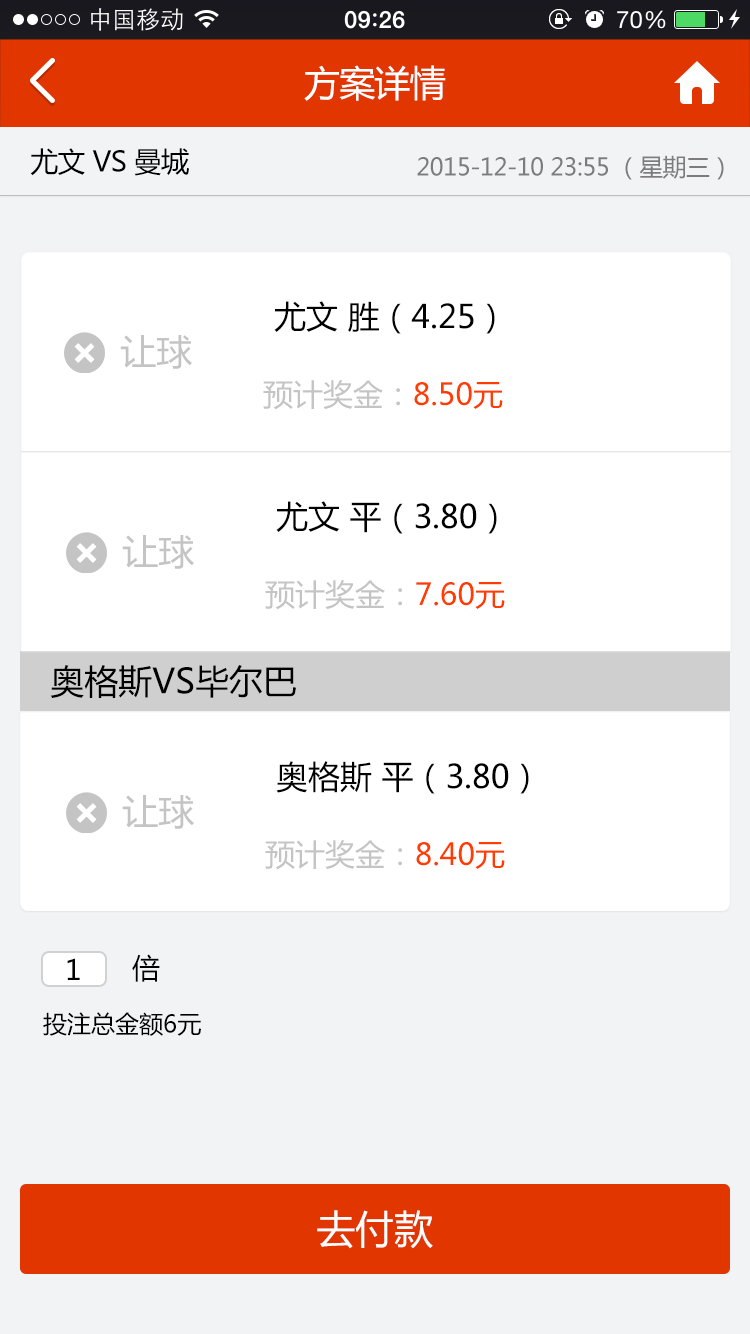
<style>
.page{position:relative;width:750px;height:1334px;background:#ffffff}
.page>*{position:absolute;margin:0}
.t1{font:36px "MicrosoftYaHei";letter-spacing:-0.025em;color:#ffffff}
.t2{font:28px "MicrosoftYaHei";letter-spacing:-0.025em;color:#000000}
.t3{font:24px "MicrosoftYaHei";letter-spacing:-0.025em;color:#7c7c7c}
.t4{font:32px "MicrosoftYaHei";color:#000000}
.t5{font:36px "MicrosoftYaHei";color:#c4c4c4}
.t6{font:30px "MicrosoftYaHei";color:#c4c4c4}
.t7{font:30px "MicrosoftYaHei";color:#ff3d00}
.t8{font:34px "MicrosoftYaHei";color:#000000}
.t9{font:28px "MicrosoftYaHei";color:#000000}
.t10{font:24px "MicrosoftYaHei";color:#000000}
.t11{font:39px "MicrosoftYaHei";color:#ffffff}
</style>
<div class="page">
<p class="t1" style="left:304px;top:65px;width:142px;height:36px">方案详情</p>
<p class="t2" style="left:30px;top:148px;width:159px;height:28px">尤文 VS 曼城</p>
<p class="t3" style="left:417px;top:155px;width:307px;height:25px">2015-12-10 23:55 （星期三）</p>
<p class="t4" style="left:274px;top:301px;width:221px;height:33px">尤文 胜（4.25）</p>
<p class="t5" style="left:120px;top:335px;width:72px;height:34px">让球</p>
<p class="t6" style="left:263px;top:380px;width:240px;height:30px">预计奖金：<span class="t7">8.50元</span></p>
<p class="t4" style="left:276px;top:501px;width:221px;height:33px">尤文 平（3.80）</p>
<p class="t5" style="left:122px;top:535px;width:72px;height:34px">让球</p>
<p class="t6" style="left:265px;top:580px;width:240px;height:30px">预计奖金：<span class="t7">7.60元</span></p>
<p class="t8" style="left:50px;top:665px;width:246px;height:33px">奥格斯VS毕尔巴</p>
<p class="t4" style="left:276px;top:761px;width:253px;height:33px">奥格斯 平（3.80）</p>
<p class="t5" style="left:122px;top:795px;width:72px;height:34px">让球</p>
<p class="t6" style="left:265px;top:840px;width:240px;height:30px">预计奖金：<span class="t7">8.40元</span></p>
<p class="t9" style="left:67px;top:958px;width:13px;height:22px">1</p>
<p class="t9" style="left:132px;top:954px;width:28px;height:28px">倍</p>
<p class="t10" style="left:43px;top:1012px;width:158px;height:24px">投注总金额6元</p>
<p class="t11" style="left:317px;top:1210px;width:116px;height:39px">去付款</p>
</div>
